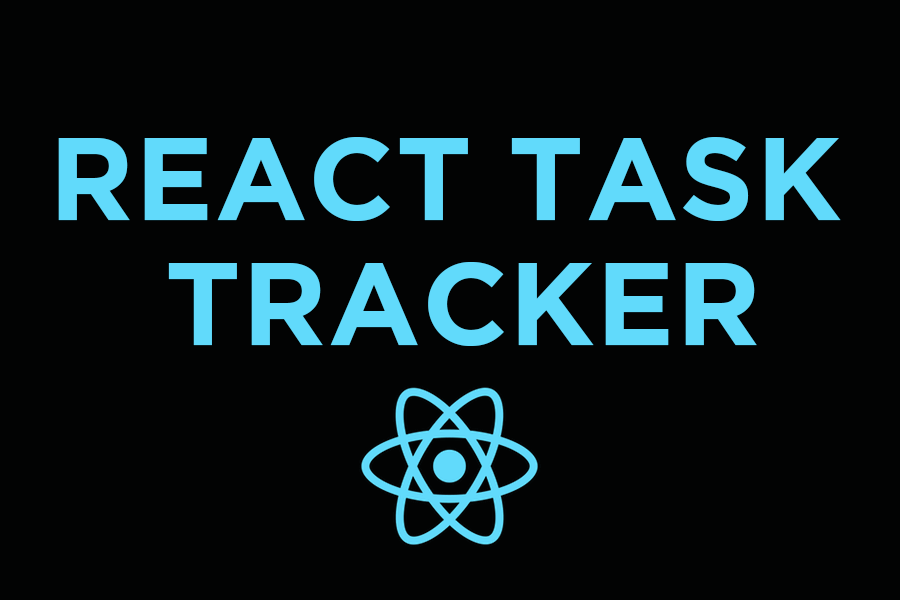
<style>
.page{position:relative;width:900px;height:600px;background:#020303}
.page>*{position:absolute;margin:0}
.t1{font:116.7px/41.7px "GothamBold";color:#61dafb;text-transform:uppercase}
</style>
<div class="page">
<p class="t1" style="left:58px;top:137px;width:783px;height:209px;text-align:center">React Task <br><br><br>Tracker</p>
</div>
